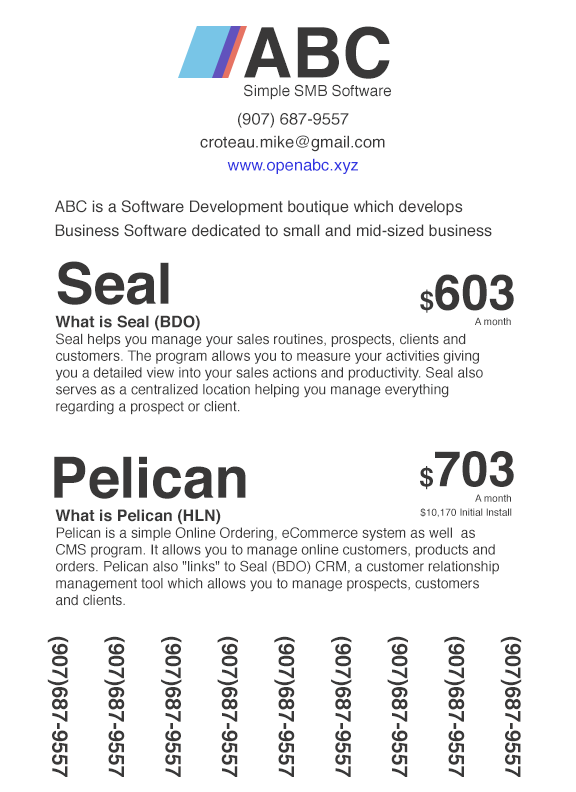
<style>
.page{position:relative;width:576px;height:792px;background:#ffffff}
.page>*{position:absolute;margin:0}
.t1{font:69.6px "Helvetica-Bold";color:#393838}
.t2{font:15.3px "Helvetica";color:#393838}
.t3{font:16.4px/23.1px "Helvetica";color:#393838}
.t4{font:16.4px "Helvetica";color:#3034e2}
.t5{font:16px/24px "Helvetica";color:#393838}
.t6{font:16px "Helvetica";color:#393838}
.t7{font:57px "Helvetica-Bold";color:#393838}
.t8{font:49.2px "Helvetica-Bold";color:#393838}
.t9{font:26px "Helvetica-Bold";color:#393838}
.t10{font:14px "Helvetica";color:#393838}
.t11{font:16px "Helvetica-Bold";color:#393838}
.t12{font:10.1px "Helvetica";color:#393838}
.t13{font:10.1px/14.1px "Helvetica";color:#393838}
.t14{font:21.7px "Helvetica-Bold";color:#393838}
</style>
<div class="page">
<p class="t1" style="left:244px;top:26px;width:146px;height:53px">ABC</p>
<p class="t2" style="left:244px;top:84px;width:147px;height:16px">Simple SMB Software</p>
<p class="t3" style="left:200px;top:112px;width:185px;height:40px;text-align:center">(907) 687-9557<br>croteau.mike@gmail.com</p>
<p class="t4" style="left:227px;top:158px;width:131px;height:16px">www.openabc.xyz</p>
<p class="t5" style="left:55px;top:200px;width:437px;height:37px">ABC is a Software Development boutique which develops Business Software dedicated to small and mid-sized business markets. <br><span class="t6"><br>.</span></p>
<p class="t7" style="left:57px;top:261px;width:112px;height:44px">Seal</p>
<p class="t8" style="left:420px;top:274px;width:94px;height:39px"><span class="t9">$</span>603</p>
<p class="t10" style="left:55px;top:315px;width:428px;height:100px"><span class="t6"><br></span><span class="t11">What is Seal (BDO)<br></span>Seal helps you manage your sales routines, prospects, clients and customers. The program allows you to measure your activities giving you a detailed view into your sales actions and productivity. Seal also serves as a centralized location helping you manage everything regarding a prospect or client.<br><span class="t6"><br>.</span></p>
<p class="t12" style="left:475px;top:317px;width:36px;height:9px">A month</p>
<p class="t7" style="left:54px;top:456px;width:192px;height:43px">Pelican</p>
<p class="t8" style="left:420px;top:451px;width:94px;height:39px"><span class="t9">$</span>703</p>
<p class="t13" style="left:420px;top:494px;width:92px;height:24px;text-align:right">A month<br>$10,170 Initial Install</p>
<p class="t10" style="left:55px;top:509px;width:444px;height:97px"><span class="t11">What is Pelican (HLN)<br></span>Pelican is a simple Online Ordering, eCommerce system as well  as CMS program. It allows you to manage online customers, products and orders. Pelican also "links" to Seal (BDO) CRM, a customer relationship management tool which allows you to manage prospects, customers and clients. <br><span class="t6">.</span></p>
<p class="t14" style="left:47px;top:636px;width:22px;height:141px;rotate:90deg">(907)687-9557</p>
<p class="t14" style="left:104px;top:636px;width:21px;height:141px;rotate:90deg">(907)687-9557</p>
<p class="t14" style="left:161px;top:636px;width:21px;height:141px;rotate:90deg">(907)687-9557</p>
<p class="t14" style="left:217px;top:636px;width:21px;height:141px;rotate:90deg">(907)687-9557</p>
<p class="t14" style="left:274px;top:636px;width:21px;height:141px;rotate:90deg">(907)687-9557</p>
<p class="t14" style="left:331px;top:636px;width:21px;height:141px;rotate:90deg">(907)687-9557</p>
<p class="t14" style="left:387px;top:636px;width:21px;height:141px;rotate:90deg">(907)687-9557</p>
<p class="t14" style="left:444px;top:636px;width:21px;height:141px;rotate:90deg">(907)687-9557</p>
<p class="t14" style="left:500px;top:636px;width:22px;height:141px;rotate:90deg">(907)687-9557</p>
</div>
